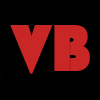
<style>
.page{position:relative;width:100px;height:100px;background:#000000}
.page>*{position:absolute;margin:0}
.t1{font:68px "Bauhaus93";color:#c92626;font-weight:bold}
</style>
<div class="page">
<p class="t1" style="left:10px;top:25px;width:80px;height:49px">VB</p>
</div>
